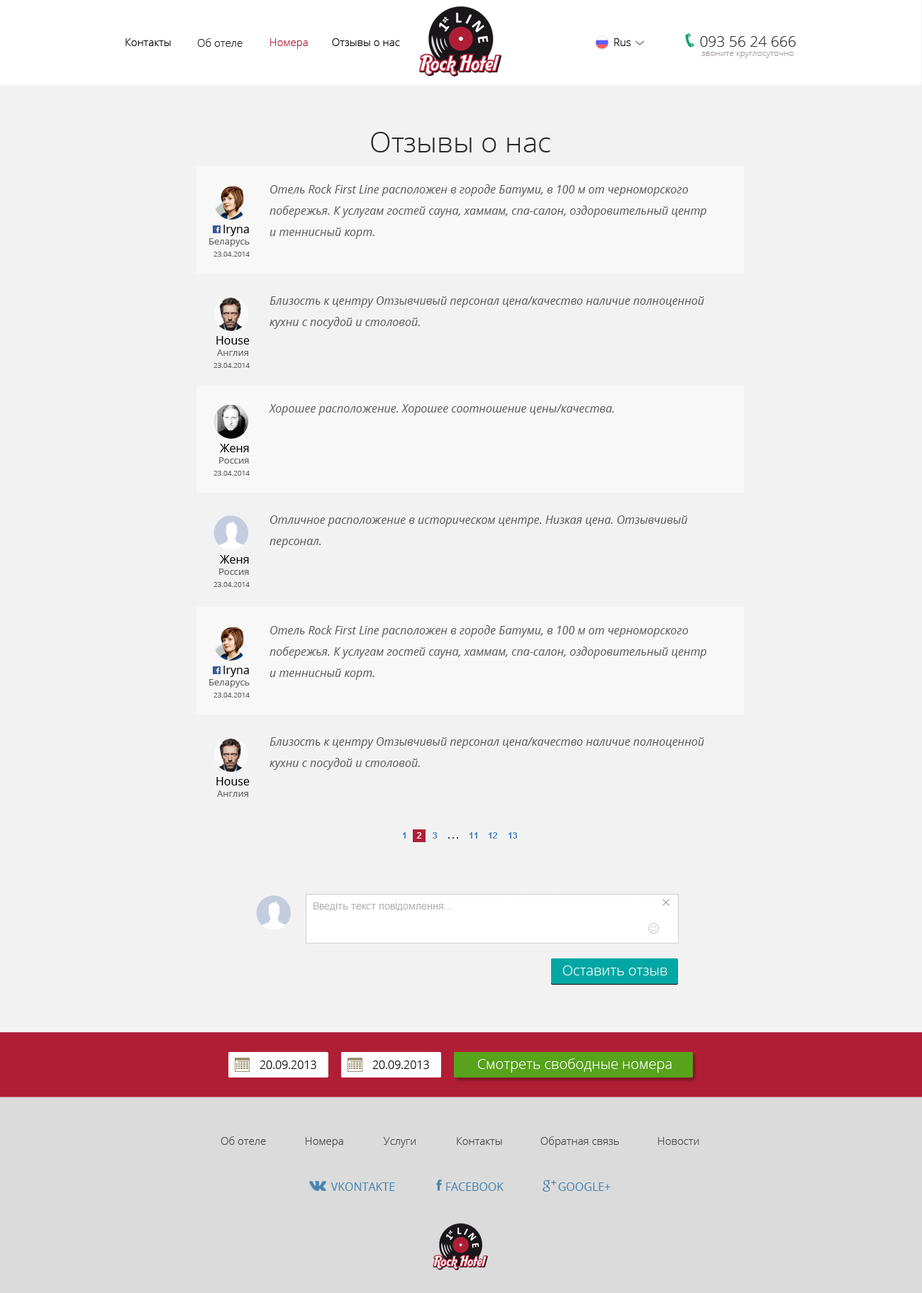
<style>
.page{position:relative;width:922px;height:1293px;background:#f2f2f2}
.page>*{position:absolute;margin:0}
.t1{font:10.6px "OpenSans-Light";color:#000000}
.t2{font:10.6px "OpenSans-Light";color:#222222}
.t3{font:10.6px "OpenSans-Light";color:#b01e36}
.t4{font:14.9px "OpenSans-Light";color:#333333}
.t5{font:8.5px "OpenSans-Light";color:#a29a9a}
.t6{font:28.4px "OpenSans-Light";color:#292929}
.t7{font:11.3px/21.3px "OpenSans-Italic";color:#5e5e5e}
.t8{font:11.3px "OpenSans";color:#000000}
.t9{font:9.2px "OpenSans";color:#666666}
.t10{font:7.1px "OpenSans";color:#666666}
.t11{font:11.3px "OpenSans-Italic";color:#5e5e5e}
.t12{font:8.5px "Arial-BoldMT";color:#5590c6}
.t13{font:8.5px "Arial-BoldMT";color:#ffffff}
.t14{font:8.5px "Arial-BoldMT";color:#3d3d3d}
.t15{font:14.2px "OpenSans-Light";color:#ffffff}
.t16{font:11.3px "OpenSans-Light";color:#000000}
.t17{font:10.6px "OpenSans-Light";color:#464646}
.t18{font:11.3px "OpenSans";color:#4985af}
</style>
<div class="page">
<p class="t1" style="left:126px;top:38px;width:45px;height:8px">Контакты</p>
<p class="t2" style="left:197px;top:38px;width:46px;height:9px">Об отеле</p>
<p class="t3" style="left:270px;top:38px;width:38px;height:11px">Номера</p>
<p class="t1" style="left:332px;top:38px;width:68px;height:8px">Отзывы о нас</p>
<p class="t1" style="left:614px;top:38px;width:17px;height:8px">Rus</p>
<p class="t4" style="left:700px;top:36px;width:96px;height:11px">093 56 24 666</p>
<p class="t5" style="left:701px;top:52px;width:93px;height:6px">звоните круглосуточно</p>
<p class="t6" style="left:371px;top:132px;width:179px;height:20px">Отзывы о нас</p>
<p class="t7" style="left:269px;top:184px;width:437px;height:55px">Отель Rock First Line расположен в городе Батуми, в 100 м от черноморского побережья. К услугам гостей сауна, хаммам, спа-салон, оздоровительный центр и теннисный корт.</p>
<p class="t8" style="left:223px;top:225px;width:26px;height:11px">Iryna</p>
<p class="t9" style="left:209px;top:238px;width:41px;height:9px">Беларусь</p>
<p class="t10" style="left:213px;top:252px;width:37px;height:5px">23.04.2014</p>
<p class="t7" style="left:269px;top:296px;width:435px;height:33px">Близость к центру Отзывчивый персонал цена/качество наличие полноценной кухни с посудой и столовой.</p>
<p class="t8" style="left:216px;top:336px;width:34px;height:9px">House</p>
<p class="t9" style="left:217px;top:350px;width:31px;height:6px">Англия</p>
<p class="t10" style="left:213px;top:363px;width:37px;height:5px">23.04.2014</p>
<p class="t11" style="left:269px;top:404px;width:345px;height:12px">Хорошее расположение. Хорошее соотношение цены/качества.</p>
<p class="t8" style="left:220px;top:444px;width:29px;height:8px">Женя</p>
<p class="t9" style="left:219px;top:457px;width:30px;height:7px">Россия</p>
<p class="t10" style="left:213px;top:471px;width:37px;height:5px">23.04.2014</p>
<p class="t7" style="left:269px;top:516px;width:418px;height:32px">Отличное расположение в историческом центре. Низкая цена. Отзывчивый персонал.</p>
<p class="t8" style="left:220px;top:555px;width:29px;height:9px">Женя</p>
<p class="t9" style="left:219px;top:569px;width:30px;height:6px">Россия</p>
<p class="t10" style="left:213px;top:582px;width:37px;height:5px">23.04.2014</p>
<p class="t7" style="left:269px;top:625px;width:437px;height:55px">Отель Rock First Line расположен в городе Батуми, в 100 м от черноморского побережья. К услугам гостей сауна, хаммам, спа-салон, оздоровительный центр и теннисный корт.</p>
<p class="t8" style="left:223px;top:666px;width:26px;height:11px">Iryna</p>
<p class="t9" style="left:209px;top:679px;width:41px;height:9px">Беларусь</p>
<p class="t10" style="left:213px;top:693px;width:37px;height:5px">23.04.2014</p>
<p class="t7" style="left:269px;top:738px;width:435px;height:32px">Близость к центру Отзывчивый персонал цена/качество наличие полноценной кухни с посудой и столовой.</p>
<p class="t8" style="left:216px;top:777px;width:34px;height:9px">House</p>
<p class="t9" style="left:217px;top:791px;width:31px;height:6px">Англия</p>
<p class="t12" style="left:403px;top:833px;width:3px;height:6px">1</p>
<p class="t13" style="left:417px;top:833px;width:4px;height:6px">2</p>
<p class="t12" style="left:433px;top:833px;width:4px;height:6px">3</p>
<p class="t12" style="left:469px;top:833px;width:8px;height:6px">11</p>
<p class="t12" style="left:489px;top:833px;width:8px;height:6px">12</p>
<p class="t12" style="left:508px;top:833px;width:9px;height:6px">13</p>
<p class="t14" style="left:448px;top:837px;width:10px;height:2px">. . .</p>
<p class="t15" style="left:562px;top:966px;width:105px;height:10px">Оставить отзыв</p>
<p class="t16" style="left:260px;top:1061px;width:56px;height:8px">20.09.2013</p>
<p class="t16" style="left:372px;top:1061px;width:57px;height:8px">20.09.2013</p>
<p class="t15" style="left:477px;top:1059px;width:195px;height:14px">Смотреть свободные номера</p>
<p class="t17" style="left:221px;top:1137px;width:45px;height:8px">Об отеле</p>
<p class="t17" style="left:306px;top:1137px;width:37px;height:11px">Номера</p>
<p class="t17" style="left:383px;top:1137px;width:33px;height:11px">Услуги</p>
<p class="t17" style="left:457px;top:1137px;width:45px;height:8px">Контакты</p>
<p class="t17" style="left:540px;top:1137px;width:79px;height:11px">Обратная связь</p>
<p class="t17" style="left:658px;top:1137px;width:41px;height:8px">Новости</p>
<p class="t18" style="left:330px;top:1183px;width:65px;height:8px">VKONTAKTE</p>
<p class="t18" style="left:446px;top:1183px;width:57px;height:8px">FACEBOOK</p>
<p class="t18" style="left:558px;top:1183px;width:53px;height:8px">GOOGLE+</p>
</div>
